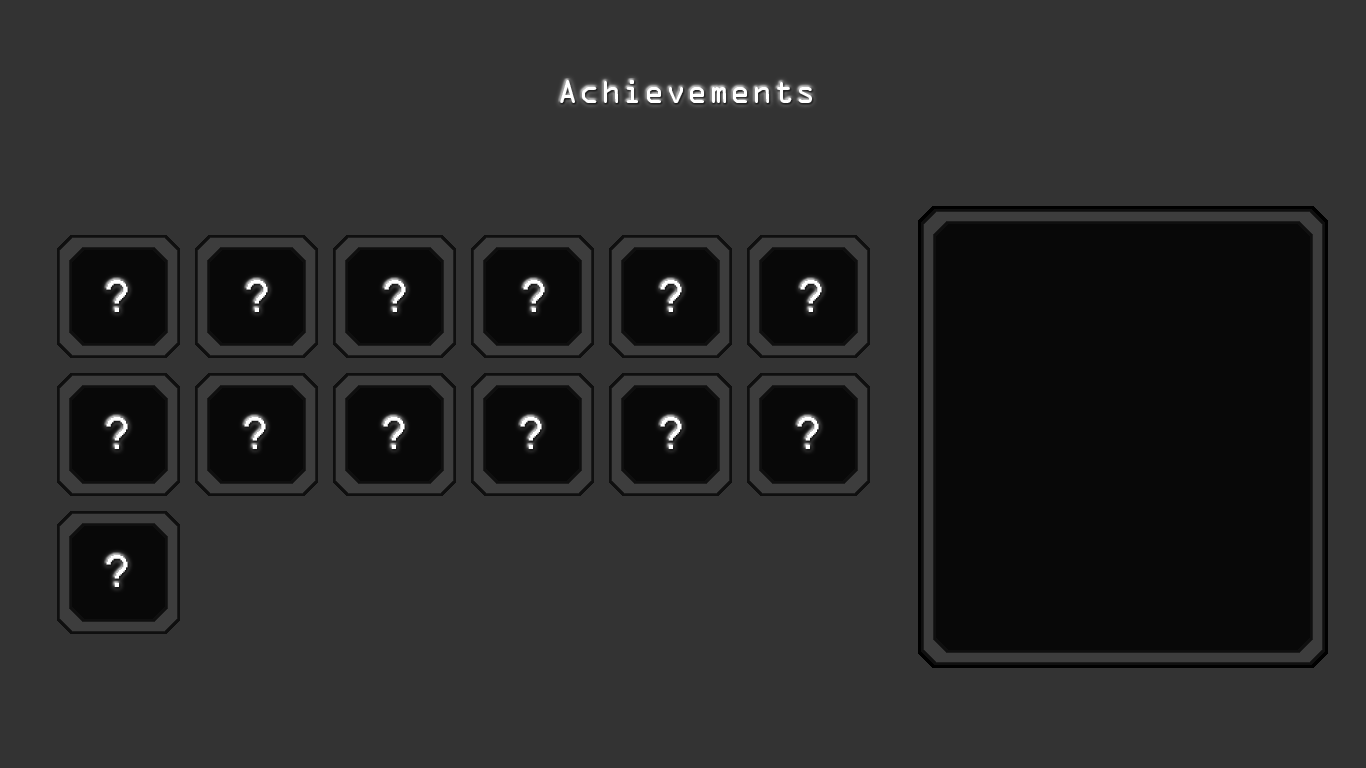
<style>
.page{position:relative;width:1366px;height:768px;background:#333333}
.page>*{position:absolute;margin:0}
.t1{font:30px "OCRAStd";color:#ffffff}
.t2{font:45px "MS Sans Serif";color:#ffffff}
</style>
<div class="page">
<p class="t1" style="left:560px;top:80px;width:252px;height:23px">Achievements</p>
<p class="t2" style="left:106px;top:279px;width:22px;height:33px">?</p>
</div>
